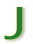
<style>
.page{position:relative;width:33px;height:44px;background:#ffffff}
.page>*{position:absolute;margin:0}
.t1{font:45.7px "Ebrima";color:#287f27;scale:1.49 1}
</style>
<div class="page">
<p class="t1" style="left:4px;top:7px;width:19px;height:33px">J</p>
</div>
